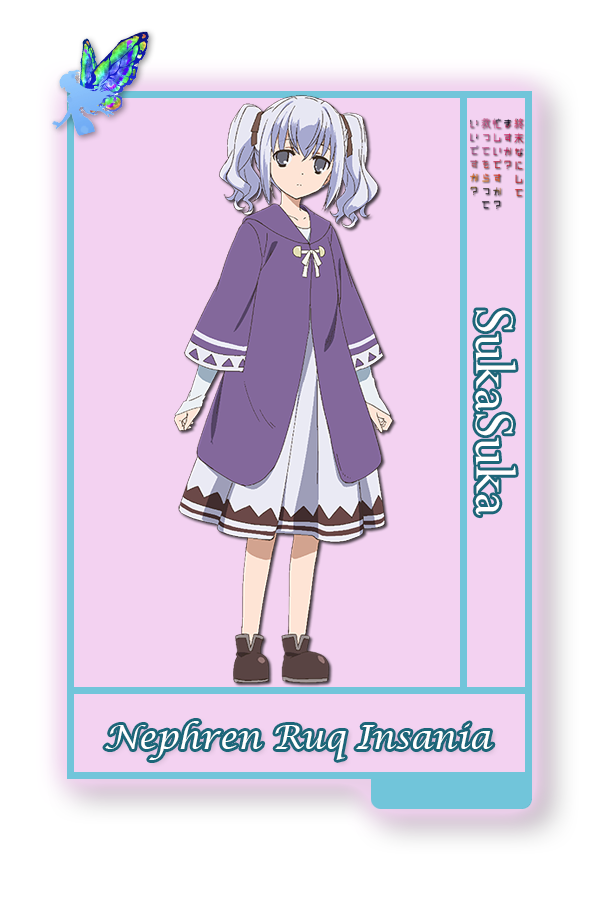
<style>
.page{position:relative;width:600px;height:900px;background:#f3d2f1}
.page>*{position:absolute;margin:0}
.t1{font:62.5px "Perpetua";color:#ffffff}
.t2{font:33.3px "LucidaCalligraphy-Italic";color:#ffffff}
</style>
<div class="page">
<p class="t1" style="left:475px;top:310px;width:41px;height:206px;rotate:90deg">SukaSuka</p>
<p class="t2" style="left:105px;top:721px;width:388px;height:39px">Nephren Ruq Insania</p>
</div>
